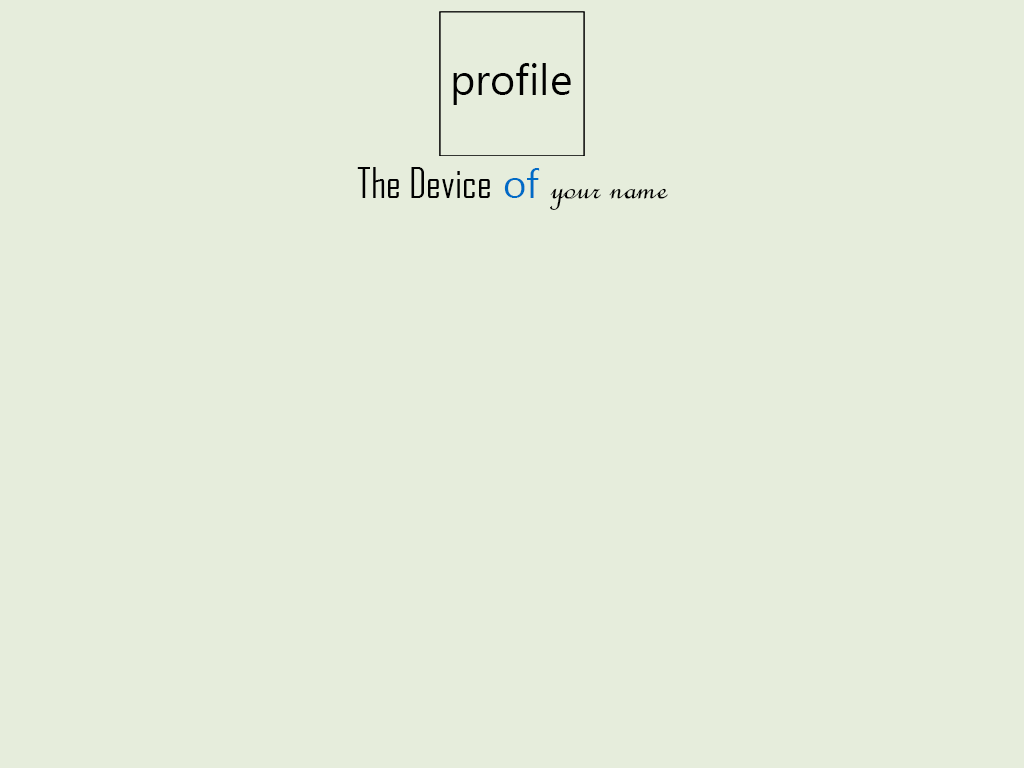
<style>
.page{position:relative;width:1024px;height:768px;background:#e6eddc}
.page>*{position:absolute;margin:0}
.t1{font:40px "AgencyFB-Reg";color:#000000}
.t2{font:40px "SegoeUI";color:#006bc6}
.t3{font:40px "FrenchScriptMT";color:#000000;font-style:italic}
</style>
<div class="page">
<p class="t1" style="left:357px;top:167px;width:311px;height:43px">The Device <span class="t2">of </span><span class="t3">your name</span></p>
</div>
